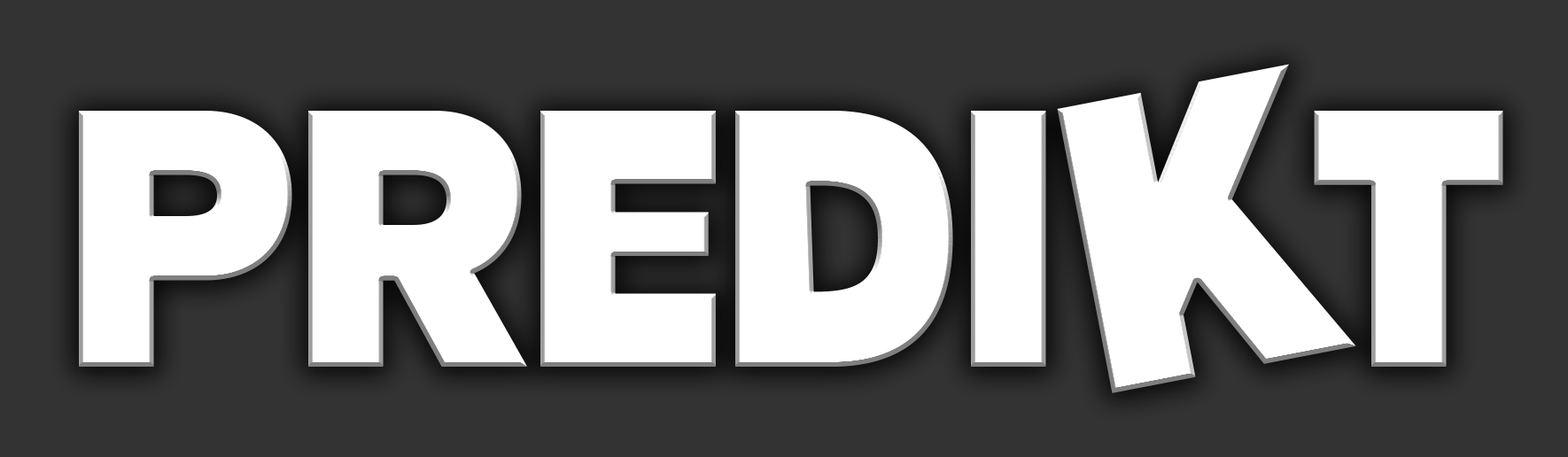
<style>
.page{position:relative;width:1568px;height:457px;background:#333333}
.page>*{position:absolute;margin:0}
.t1{font:413.5px "Radlush-ExtraBold";letter-spacing:-0.01em;color:#ffffff}
.t2{font:365.4px "Radlush-ExtraBold";letter-spacing:-0.01em;color:#ffffff}
</style>
<div class="page">
<p class="t1" style="left:1057px;top:64px;width:299px;height:329px;rotate:-11deg">K</p>
<p class="t2" style="left:79px;top:111px;width:967px;height:256px">PREDI</p>
<p class="t2" style="left:1314px;top:111px;width:189px;height:256px">T</p>
</div>
